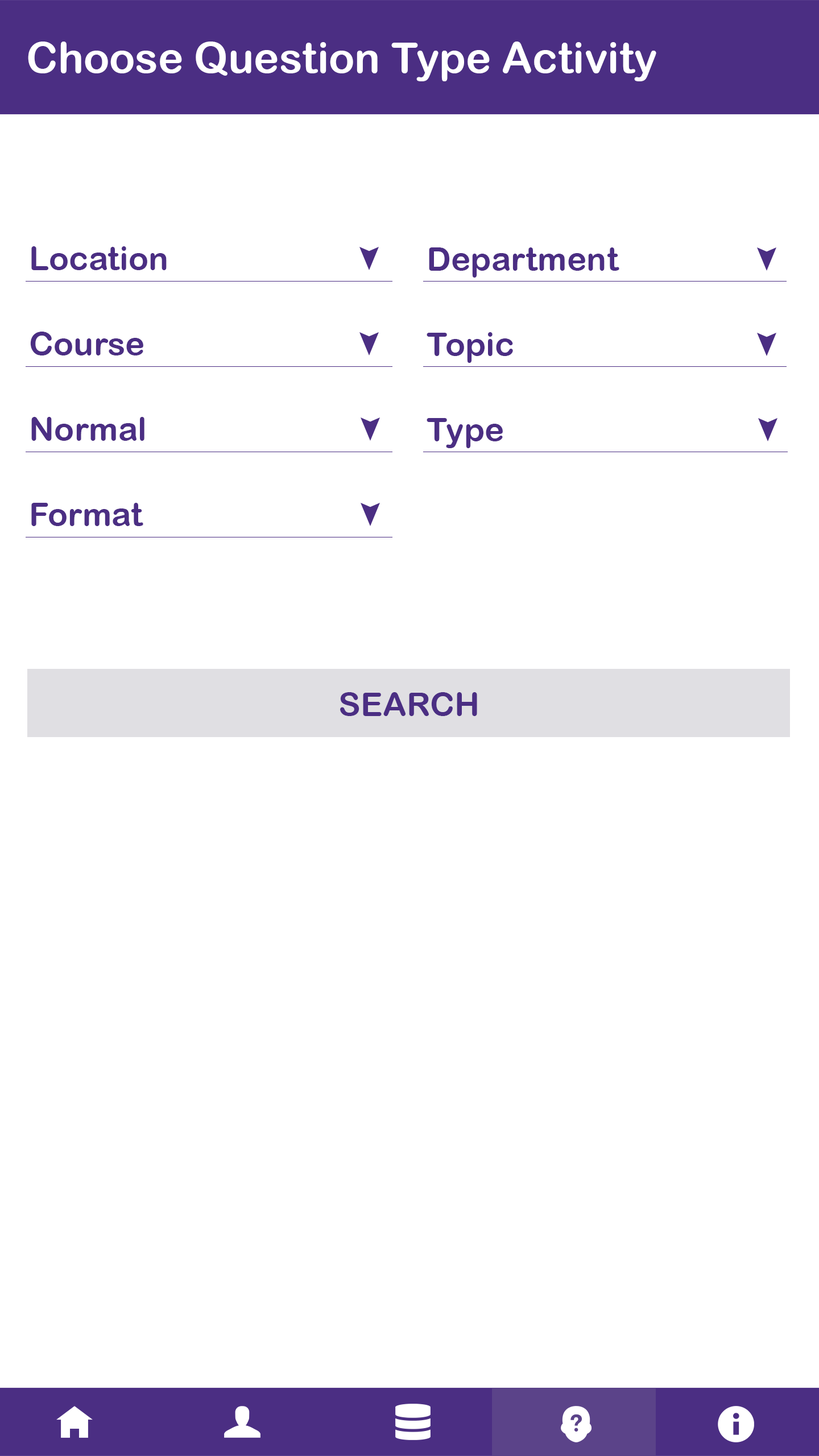
<style>
.page{position:relative;width:819px;height:1456px;background:#ffffff}
.page>*{position:absolute;margin:0}
.t1{font:42.7px "ArialRoundedMTBold";color:#ffffff}
.t2{font:33.2px "ArialRoundedMTBold";color:#4b2e83}
</style>
<div class="page">
<p class="t1" style="left:28px;top:42px;width:628px;height:39px">Choose Question Type Activity</p>
<p class="t2" style="left:31px;top:246px;width:136px;height:24px">Location</p>
<p class="t2" style="left:429px;top:247px;width:190px;height:31px">Department</p>
<p class="t2" style="left:30px;top:332px;width:113px;height:23px">Course</p>
<p class="t2" style="left:427px;top:332px;width:86px;height:31px">Topic</p>
<p class="t2" style="left:31px;top:417px;width:113px;height:24px">Normal</p>
<p class="t2" style="left:427px;top:418px;width:76px;height:30px">Type</p>
<p class="t2" style="left:31px;top:503px;width:112px;height:23px">Format</p>
<p class="t2" style="left:340px;top:692px;width:137px;height:24px">SEARCH</p>
</div>
